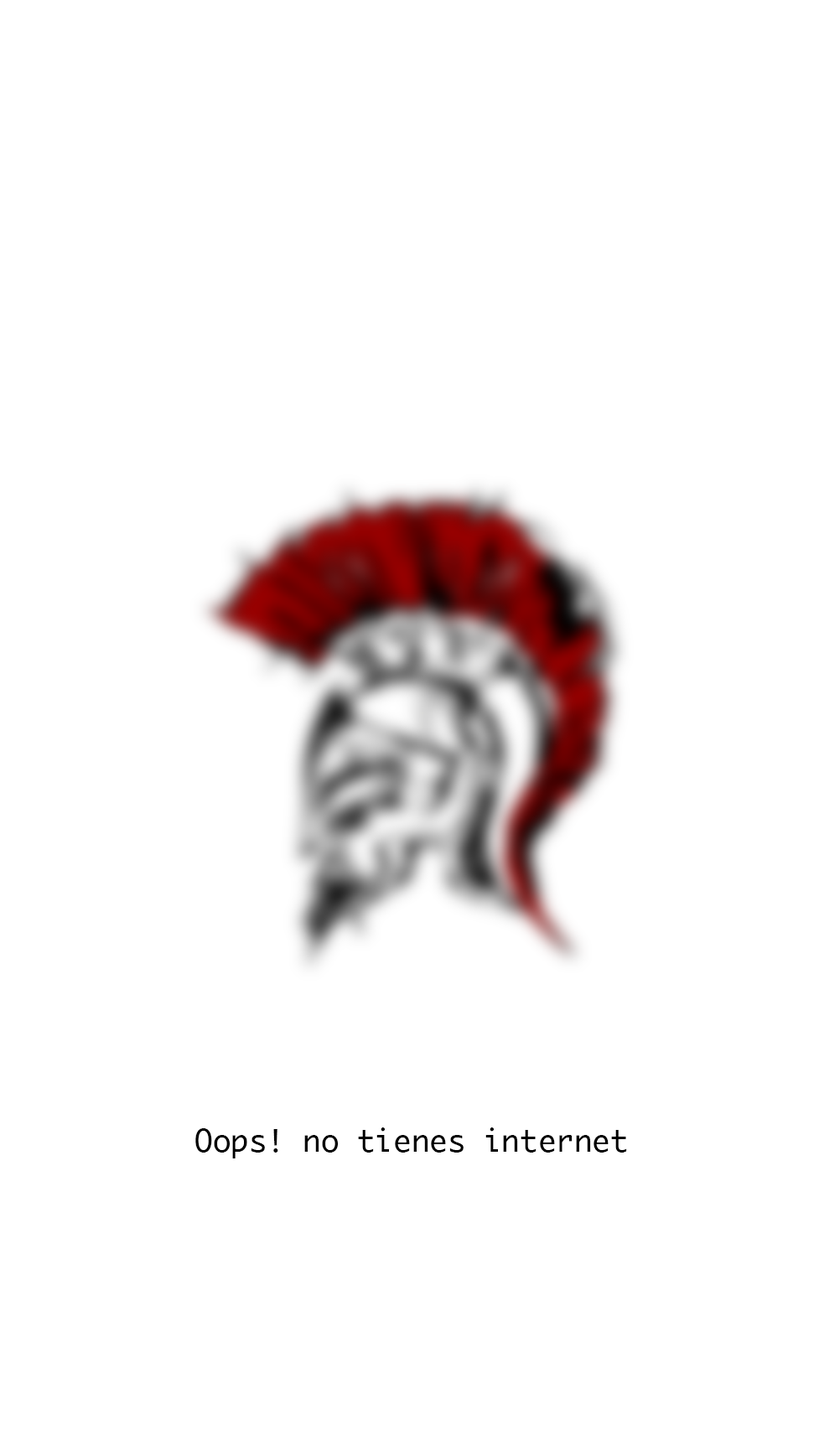
<style>
.page{position:relative;width:819px;height:1456px;background:#ffffff}
.page>*{position:absolute;margin:0}
.t1{font:30.2px "Ayuthaya";color:#000000}
</style>
<div class="page">
<p class="t1" style="left:195px;top:1127px;width:432px;height:31px">Oops! no tienes internet</p>
</div>
